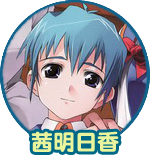
<style>
.page{position:relative;width:150px;height:156px}
.page>*{position:absolute;margin:0}
.t1{font:22.4px "DFMaruGothic-SB-WIN-RKSJ-H";letter-spacing:-0.015em;color:#eaf49c}
</style>
<div class="page">
<p class="t1" style="left:31px;top:131px;width:88px;height:21px">茜明日香</p>
</div>
